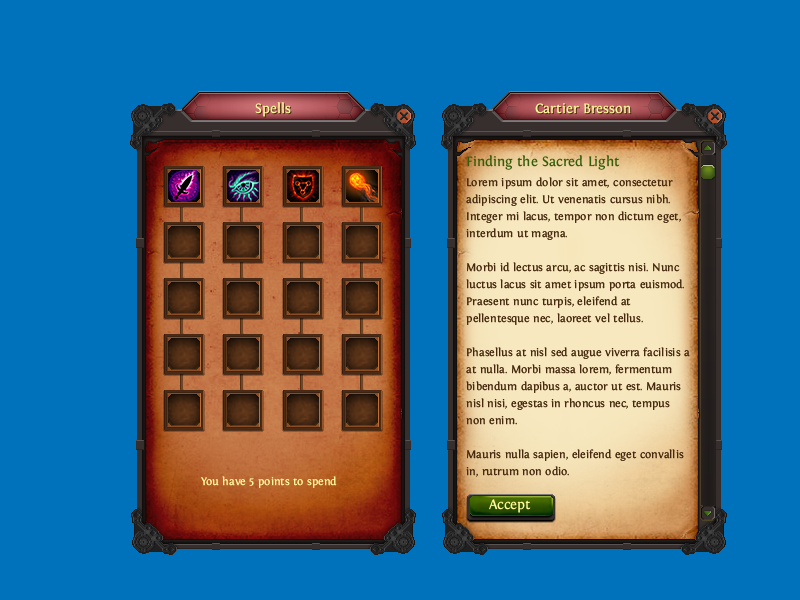
<style>
.page{position:relative;width:800px;height:600px;background:#0072bc}
.page>*{position:absolute;margin:0}
.t1{font:14.2px "Fontin-Regular";color:#fff799}
.t2{font:11.3px/17px "Fontin-Regular";color:#46290e}
.t3{font:14.2px/17px "Fontin-Regular";color:#345e0b}
.t4{font:11.3px/19.8px "Fontin-Regular";color:#46290e}
.t5{font:11.3px "Fontin-Regular";color:#fff799}
</style>
<div class="page">
<p class="t1" style="left:255px;top:102px;width:36px;height:15px">Spells</p>
<p class="t1" style="left:535px;top:103px;width:96px;height:11px">Cartier Bresson</p>
<p class="t2" style="left:466px;top:155px;width:224px;height:322px"><span class="t3">Finding the Sacred Light<br></span><span class="t4">Lorem ipsum dolor sit amet, consectetur </span>adipiscing elit. Ut venenatis cursus nibh. Integer mi lacus, tempor non dictum eget, interdum ut magna.<br><br>Morbi id lectus arcu, ac sagittis nisi. Nunc luctus lacus sit amet ipsum porta euismod. Praesent nunc turpis, eleifend at pellentesque nec, laoreet vel tellus. <br><br>Phasellus at nisl sed augue viverra facilisis a at nulla. Morbi massa lorem, fermentum bibendum dapibus a, auctor ut est. Mauris nisl nisi, egestas in rhoncus nec, tempus non enim. <br><br>Mauris nulla sapien, eleifend eget convallis in, rutrum non odio.</p>
<p class="t5" style="left:201px;top:476px;width:136px;height:12px">You have 5 points to spend</p>
<p class="t1" style="left:489px;top:499px;width:42px;height:14px">Accept</p>
</div>
